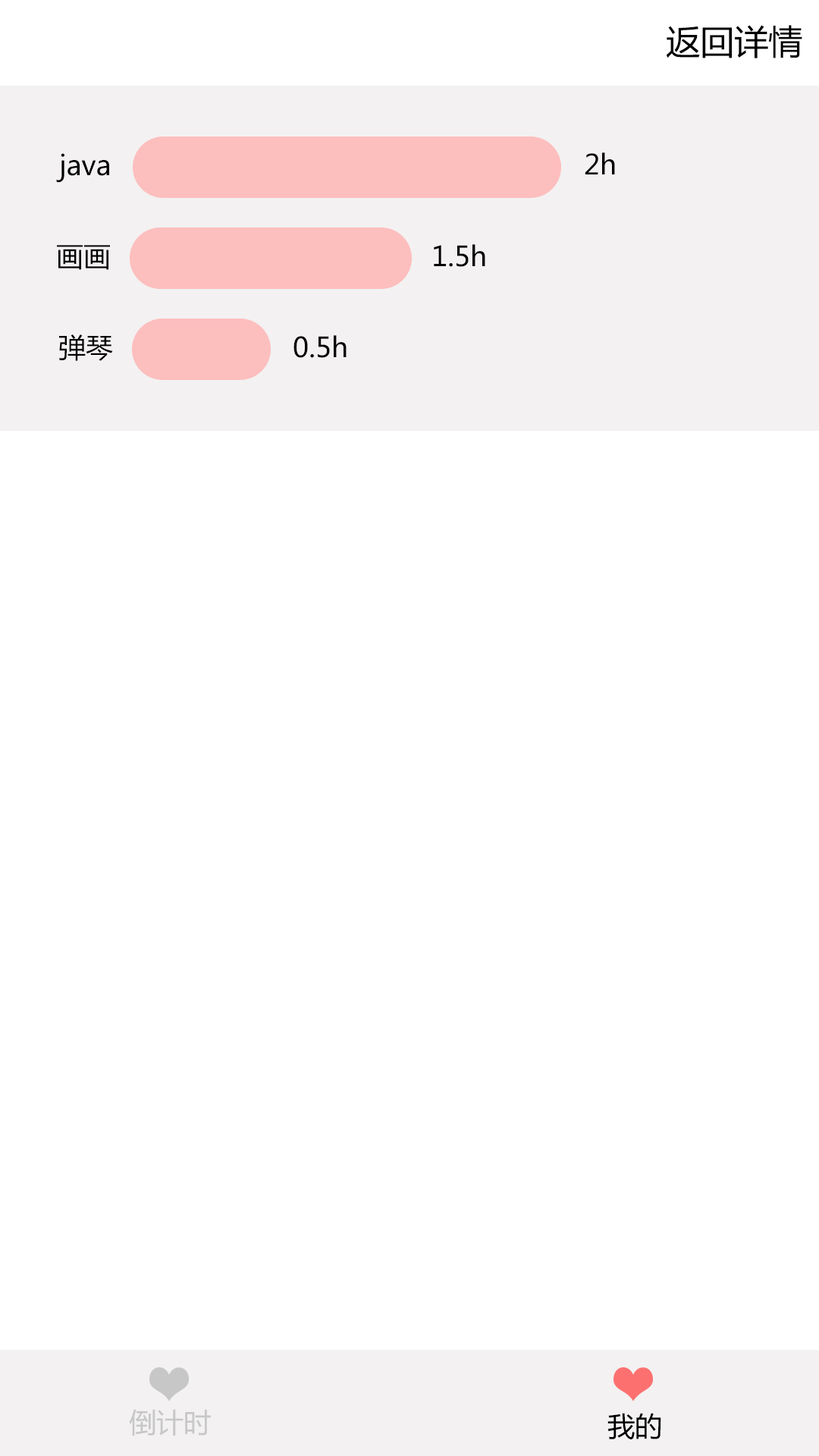
<style>
.page{position:relative;width:819px;height:1456px;background:#ffffff}
.page>*{position:absolute;margin:0}
.t1{font:34.1px "MicrosoftYaHei";color:#000000}
.t2{font:27.3px "MicrosoftYaHei";color:#000000}
.t3{font:27.3px "MicrosoftYaHei";color:#c7c7c7}
</style>
<div class="page">
<p class="t1" style="left:666px;top:25px;width:136px;height:33px">返回详情</p>
<p class="t2" style="left:56px;top:153px;width:53px;height:30px">java</p>
<p class="t2" style="left:585px;top:152px;width:30px;height:22px">2h</p>
<p class="t2" style="left:57px;top:245px;width:53px;height:25px">画画</p>
<p class="t2" style="left:434px;top:244px;width:51px;height:23px">1.5h</p>
<p class="t2" style="left:59px;top:334px;width:54px;height:27px">弹琴</p>
<p class="t2" style="left:293px;top:335px;width:54px;height:23px">0.5h</p>
<p class="t3" style="left:129px;top:1409px;width:82px;height:27px">倒计时</p>
<p class="t2" style="left:607px;top:1413px;width:54px;height:26px">我的</p>
</div>
